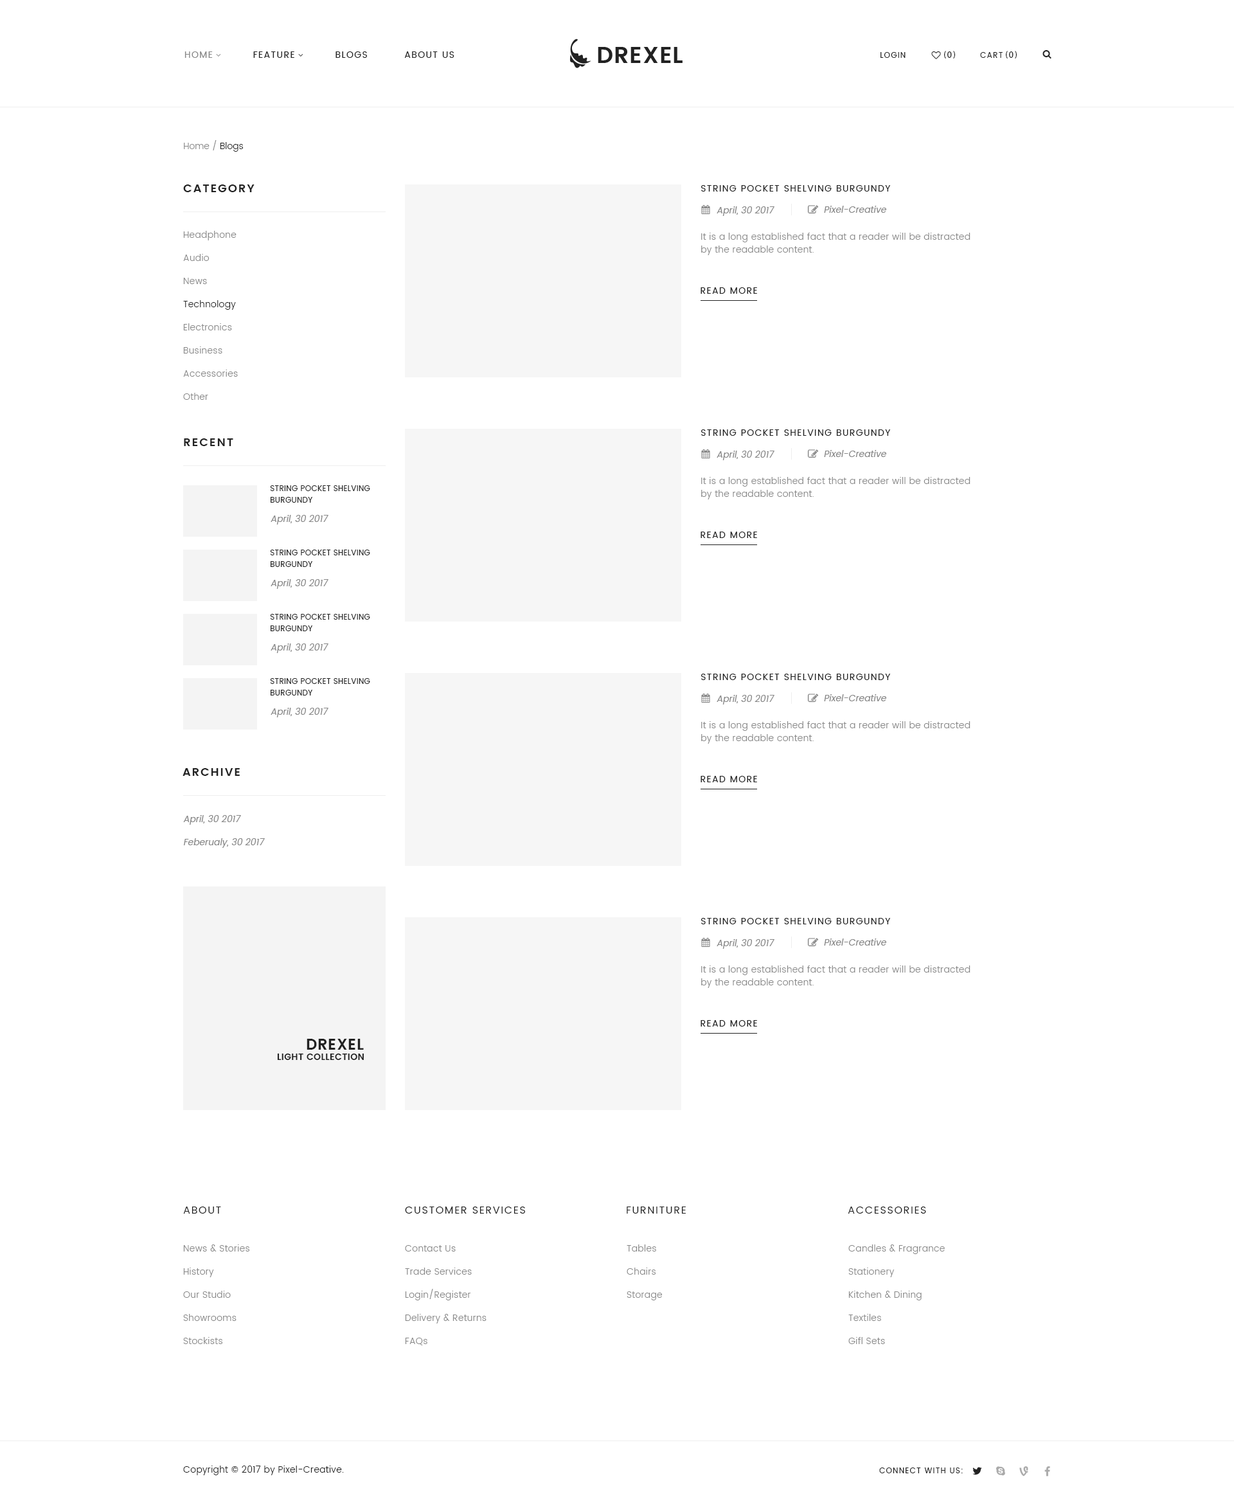
<style>
.page{position:relative;width:1234px;height:1499px;background:#ffffff}
.page>*{position:absolute;margin:0}
.t1{font:9px "Poppins-Regular";letter-spacing:0.1em;color:#222222;text-transform:uppercase}
.t2{font:9px "Poppins-Regular";letter-spacing:0.1em;color:#888888;text-transform:uppercase}
.t3{font:7.7px "Poppins-Regular";letter-spacing:0.1em;color:#222222;text-transform:uppercase}
.t4{font:9px "MyriadPro-Regular";letter-spacing:0.1em;color:#222222;text-transform:uppercase}
.t5{font:9px "Poppins-Light";color:#888888}
.t6{font:9px "Poppins-Light";color:#222222}
.t7{font:11.6px "Poppins-SemiBold";letter-spacing:0.1em;color:#222222;text-transform:uppercase}
.t8{font:9px "Poppins-Regular";color:#888888;font-style:italic}
.t9{font:9px/23.1px "Poppins-Light";letter-spacing:0.025em;color:#888888}
.t10{font:9px/23.1px "Poppins-Light";letter-spacing:0.025em;color:#222222}
.t11{font:9px/12.9px "Poppins-Light";letter-spacing:0.025em;color:#888888}
.t12{font:7.7px/11.6px "Poppins-Regular";letter-spacing:0.025em;color:#222222;text-transform:uppercase}
.t13{font:9px/23.1px "Poppins-Regular";color:#888888;font-style:italic}
.t14{font:15.4px "Poppins-SemiBold";letter-spacing:0.025em;color:#222222;text-transform:uppercase}
.t15{font:9px "Poppins-SemiBold";letter-spacing:0.025em;color:#222222;text-transform:uppercase}
.t16{font:10.3px "Poppins-Regular";letter-spacing:0.1em;color:#222222;text-transform:uppercase}
.t17{font:9px "Poppins-Light";letter-spacing:0.025em;color:#222222}
</style>
<div class="page">
<p class="t1" style="left:184px;top:51px;width:271px;height:7px"><span class="t2">Home</span>           Feature           Blogs          About Us</p>
<p class="t3" style="left:881px;top:52px;width:25px;height:6px">Login</p>
<p class="t4" style="left:944px;top:51px;width:11px;height:8px">(0)</p>
<p class="t3" style="left:980px;top:52px;width:23px;height:6px">Cart</p>
<p class="t4" style="left:1006px;top:51px;width:11px;height:8px">(0)</p>
<p class="t5" style="left:184px;top:140px;width:59px;height:12px">Home / <span class="t6">Blogs</span></p>
<p class="t7" style="left:183px;top:184px;width:72px;height:8px">CAtegory</p>
<p class="t1" style="left:701px;top:185px;width:190px;height:7px">String Pocket Shelving Burgundy</p>
<p class="t8" style="left:717px;top:206px;width:58px;height:10px">April, 30 2017</p>
<p class="t8" style="left:824px;top:206px;width:63px;height:7px">Pixel-Creative</p>
<p class="t9" style="left:183px;top:231px;width:55px;height:169px">Headphone<br>Audio<br>News<br><span class="t10">Technology<br></span>Electronics<br>Business<br>Accessories<br>Other</p>
<p class="t11" style="left:701px;top:233px;width:270px;height:22px">It is a long established fact that a reader will be distracted by the readable content.</p>
<p class="t1" style="left:701px;top:287px;width:56px;height:7px">Read more</p>
<p class="t1" style="left:701px;top:429px;width:190px;height:7px">String Pocket Shelving Burgundy</p>
<p class="t7" style="left:184px;top:438px;width:49px;height:8px">Recent</p>
<p class="t8" style="left:717px;top:451px;width:58px;height:9px">April, 30 2017</p>
<p class="t8" style="left:824px;top:450px;width:63px;height:7px">Pixel-Creative</p>
<p class="t12" style="left:270px;top:485px;width:100px;height:18px">String Pocket Shelving Burgundy</p>
<p class="t11" style="left:701px;top:477px;width:270px;height:23px">It is a long established fact that a reader will be distracted by the readable content.</p>
<p class="t8" style="left:271px;top:515px;width:57px;height:10px">April, 30 2017</p>
<p class="t1" style="left:701px;top:532px;width:56px;height:6px">Read more</p>
<p class="t12" style="left:270px;top:550px;width:100px;height:17px">String Pocket Shelving Burgundy</p>
<p class="t8" style="left:271px;top:579px;width:57px;height:10px">April, 30 2017</p>
<p class="t12" style="left:270px;top:614px;width:100px;height:17px">String Pocket Shelving Burgundy</p>
<p class="t8" style="left:271px;top:644px;width:57px;height:9px">April, 30 2017</p>
<p class="t1" style="left:701px;top:674px;width:190px;height:6px">String Pocket Shelving Burgundy</p>
<p class="t12" style="left:270px;top:678px;width:100px;height:18px">String Pocket Shelving Burgundy</p>
<p class="t8" style="left:717px;top:695px;width:58px;height:10px">April, 30 2017</p>
<p class="t8" style="left:824px;top:694px;width:63px;height:7px">Pixel-Creative</p>
<p class="t8" style="left:271px;top:708px;width:57px;height:9px">April, 30 2017</p>
<p class="t11" style="left:701px;top:721px;width:270px;height:23px">It is a long established fact that a reader will be distracted by the readable content.</p>
<p class="t7" style="left:183px;top:768px;width:57px;height:8px">ARCHIVE</p>
<p class="t1" style="left:701px;top:776px;width:56px;height:6px">Read more</p>
<p class="t13" style="left:183px;top:815px;width:82px;height:33px">April, 30 2017<br>Feberualy, 30 2017</p>
<p class="t1" style="left:701px;top:918px;width:190px;height:6px">String Pocket Shelving Burgundy</p>
<p class="t8" style="left:717px;top:939px;width:58px;height:10px">April, 30 2017</p>
<p class="t8" style="left:824px;top:939px;width:63px;height:7px">Pixel-Creative</p>
<p class="t11" style="left:701px;top:966px;width:270px;height:22px">It is a long established fact that a reader will be distracted by the readable content.</p>
<p class="t1" style="left:701px;top:1020px;width:56px;height:7px">Read more</p>
<p class="t14" style="left:307px;top:1039px;width:57px;height:11px">Drexel</p>
<p class="t15" style="left:277px;top:1054px;width:87px;height:6px">light collection</p>
<p class="t16" style="left:183px;top:1207px;width:38px;height:7px">About</p>
<p class="t16" style="left:405px;top:1207px;width:120px;height:7px">Customer services</p>
<p class="t16" style="left:627px;top:1207px;width:59px;height:7px">Furniture</p>
<p class="t16" style="left:848px;top:1207px;width:78px;height:7px">Accessories</p>
<p class="t9" style="left:183px;top:1245px;width:66px;height:99px">News &amp; Stories<br>History<br>Our Studio<br>Showrooms<br>Stockists</p>
<p class="t9" style="left:405px;top:1245px;width:82px;height:101px">Contact Us<br>Trade Services<br>Login/Register<br>Delivery &amp; Returns<br>FAQs</p>
<p class="t9" style="left:627px;top:1245px;width:35px;height:55px">Tables<br>Chairs<br>Storage</p>
<p class="t9" style="left:849px;top:1245px;width:96px;height:99px">Candles &amp; Fragrance<br>Stationery<br>Kitchen &amp; Dining<br>Textiles<br>Gifl Sets</p>
<p class="t17" style="left:183px;top:1466px;width:161px;height:9px">Copyright © 2017 by Pixel-Creative.</p>
<p class="t3" style="left:879px;top:1468px;width:84px;height:5px">Connect with us:</p>
</div>
